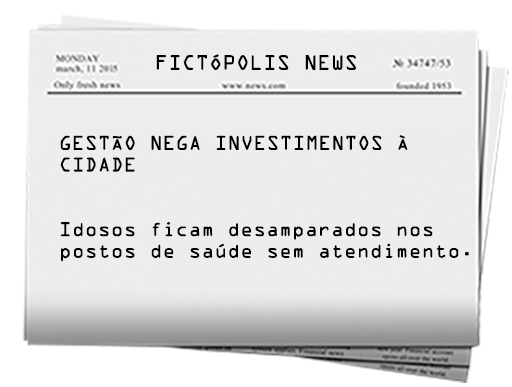
<style>
.page{position:relative;width:512px;height:387px;background:#ededed}
.page>*{position:absolute;margin:0}
.t1{font:18.8px "OCRAStd";color:#000000}
.t2{font:18px "OCRAStd";color:#000000}
</style>
<div class="page">
<p class="t1" style="left:156px;top:54px;width:200px;height:16px">FICTÓPOLIS NEWS</p>
<p class="t2" style="left:60px;top:135px;width:409px;height:127px">GESTÃO NEGA INVESTIMENTOS À<br>CIDADE<br><br><br>Idosos ficam desamparados nos <br>postos de saúde sem atendimento.</p>
</div>
